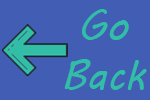
<style>
.page{position:relative;width:150px;height:100px;background:#425db4}
.page>*{position:absolute;margin:0}
.t1{font:42px "MVBoli";color:#32bea6}
</style>
<div class="page">
<p class="t1" style="left:64px;top:9px;width:83px;height:81px;text-align:center">Go<br>Back</p>
</div>
